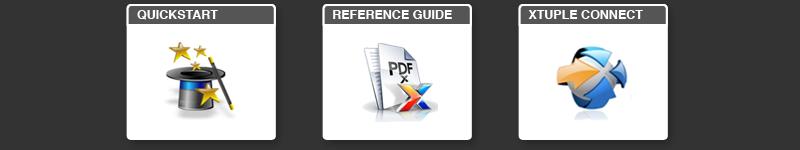
<style>
.page{position:relative;width:800px;height:150px;background:#333333}
.page>*{position:absolute;margin:0}
.t1{font:12.5px "Helvetica-Bold";color:#ffffff}
</style>
<div class="page">
<p class="t1" style="left:137px;top:10px;width:81px;height:10px">QUICKSTART</p>
<p class="t1" style="left:333px;top:10px;width:119px;height:9px">REFERENCE GUIDE</p>
<p class="t1" style="left:528px;top:10px;width:115px;height:9px">XTUPLE CONNECT</p>
</div>
